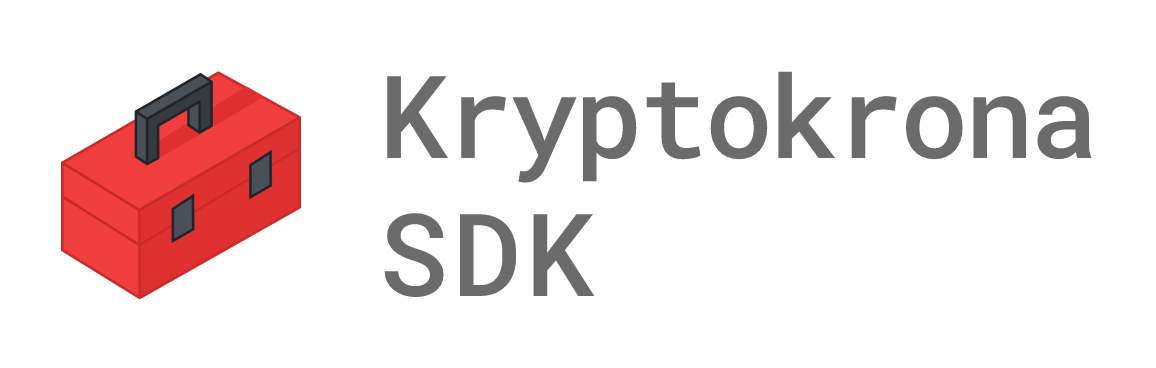
<style>
.page{position:relative;width:1156px;height:368px;background:#ffffff}
.page>*{position:absolute;margin:0}
.t1{font:115px "RobotoMono-Medium";letter-spacing:-0.034em;color:#6b6b6b}
.t2{font:115px "RobotoMono-Medium";letter-spacing:0.036em;color:#6b6b6b}
</style>
<div class="page">
<p class="t1" style="left:384px;top:71px;width:708px;height:226px">Kryptokrona<br><span class="t2">SDK</span></p>
</div>
